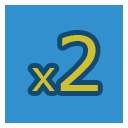
<style>
.page{position:relative;width:128px;height:128px;background:#3190cd}
.page>*{position:absolute;margin:0}
.t1{font:41.7px "Verdana";color:#cdc031}
.t2{font:75px "Verdana";color:#cdc031}
</style>
<div class="page">
<p class="t1" style="left:32px;top:35px;width:66px;height:56px">x<span class="t2">2</span></p>
</div>
